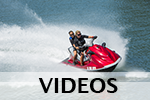
<style>
.page{position:relative;width:150px;height:100px}
.page>*{position:absolute;margin:0}
.t1{font:20.8px "LucidaSans-Demi";color:#000000}
</style>
<div class="page">
<p class="t1" style="left:38px;top:78px;width:80px;height:15px">VIDEOS</p>
</div>
